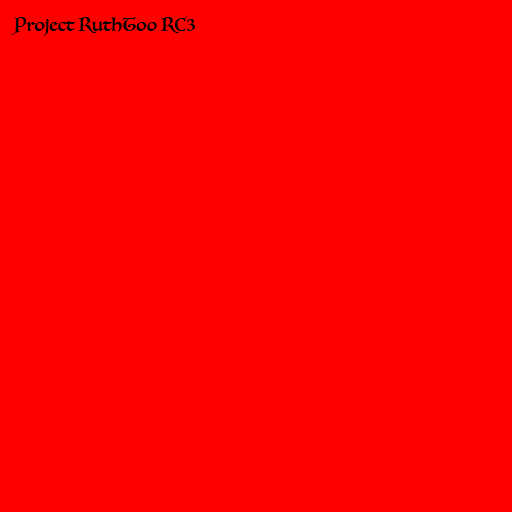
<style>
.page{position:relative;width:512px;height:512px;background:#ff0000}
.page>*{position:absolute;margin:0}
.t1{font:18px "Luminari-Regular";color:#000000}
</style>
<div class="page">
<p class="t1" style="left:11px;top:16px;width:184px;height:20px">Project RuthToo RC3</p>
</div>
